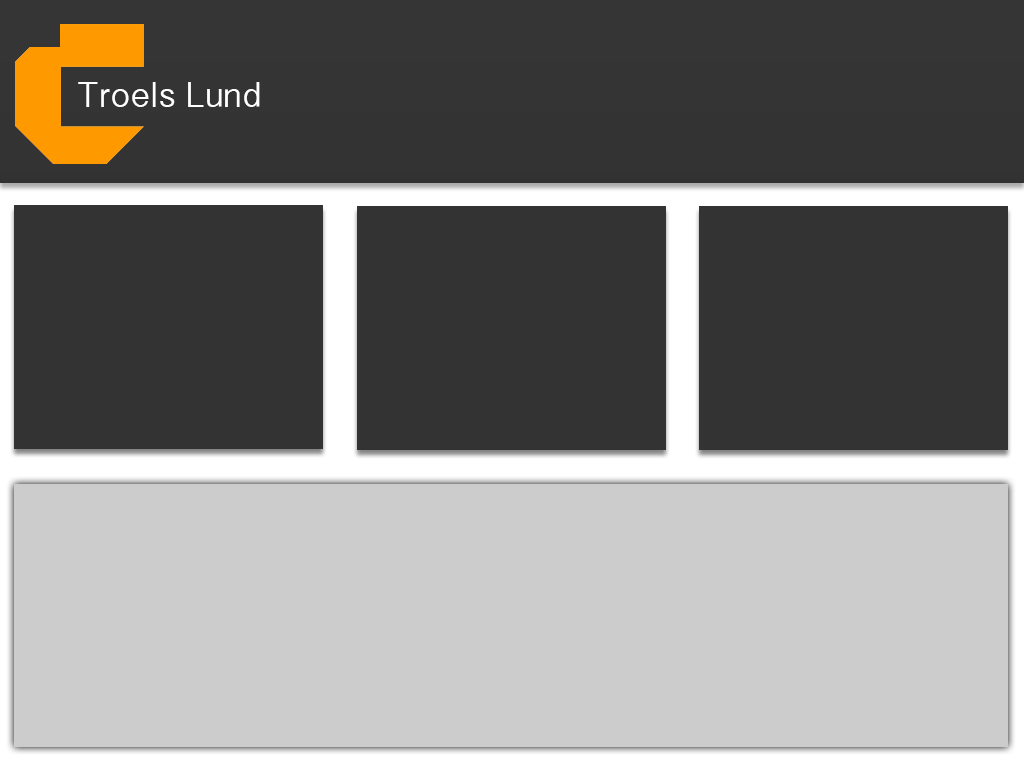
<style>
.page{position:relative;width:1024px;height:768px;background:#333333}
.page>*{position:absolute;margin:0}
.t1{font:36px "MyanmarSangamMN";color:#ffffff}
</style>
<div class="page">
<p class="t1" style="left:78px;top:82px;width:182px;height:25px">Troels Lund</p>
</div>
